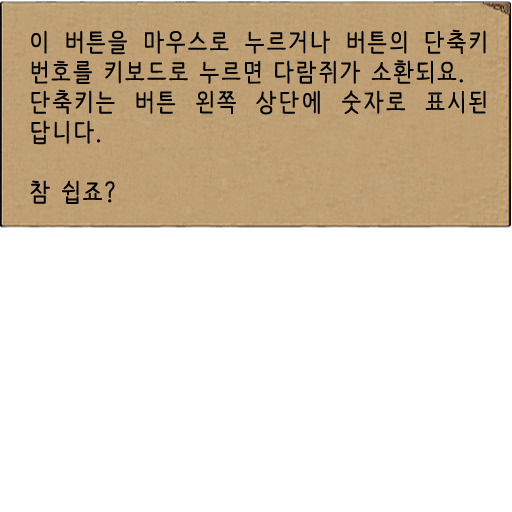
<style>
.page{position:relative;width:512px;height:512px;background:#ffffff}
.page>*{position:absolute;margin:0}
.t1{font:25px "NanumBarunpen";letter-spacing:0.075em;color:#000000;font-weight:bold}
</style>
<div class="page">
<p class="t1" style="left:30px;top:29px;width:456px;height:175px;text-align:justify">이 버튼을 마우스로 누르거나 버튼의 단축키 번호를 키보드로 누르면 다람쥐가 소환되요.<br>단축키는 버튼 왼쪽 상단에 숫자로 표시된 답니다. <br><br>참 쉽죠?</p>
</div>
